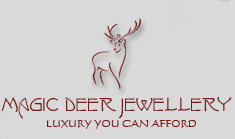
<style>
.page{position:relative;width:235px;height:139px;background:#d9d9d9}
.page>*{position:absolute;margin:0}
.t1{font:24px "IsadoraCaps";color:#741c1b;text-transform:uppercase}
.t2{font:9.8px "Calligraphic421BT-RomanB";color:#741c1b;text-transform:uppercase}
</style>
<div class="page">
<p class="t1" style="left:1px;top:97px;width:231px;height:22px">Magic Deer Jewellery</p>
<p class="t2" style="left:47px;top:120px;width:149px;height:9px">luxury you can afford</p>
</div>
